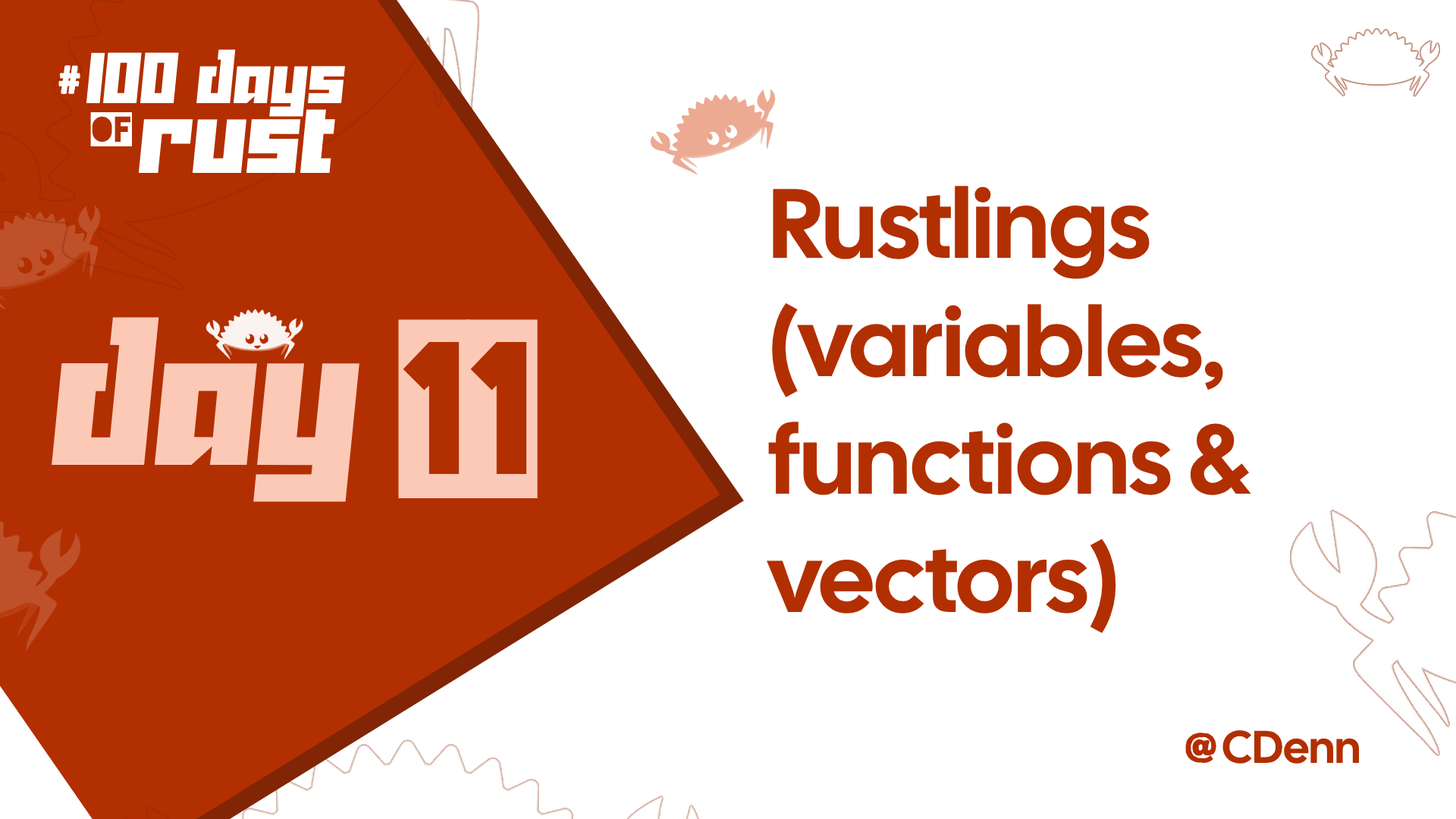
<style>
.page{position:relative;width:1456px;height:819px;background:#ffffff}
.page>*{position:absolute;margin:0}
.t1{font:68.6px "Yukarimobile";color:#ffffff}
.t2{font:40.6px "Matiz";color:#ffffff}
.t3{font:40.6px "Blackout-2AM";color:#ffffff}
.t4{font:99.8px "Yukarimobile";color:#ffffff}
.t5{font:98.3px "CalSans-Regular";color:#b22f01}
.t6{font:189.2px "Yukarimobile";color:#fcc9b7}
.t7{font:212.6px "Blackout-2AM";color:#fcc9b7}
.t8{font:40.6px "Matiz";color:#b22f01}
.t9{font:45.9px "CalSans-Regular";color:#b22f01}
</style>
<div class="page">
<p class="t1" style="left:86px;top:49px;width:259px;height:68px">100 Days</p>
<p class="t2" style="left:58px;top:65px;width:22px;height:29px">#</p>
<p class="t3" style="left:90px;top:112px;width:42px;height:34px">of</p>
<p class="t4" style="left:138px;top:109px;width:197px;height:65px">Rust</p>
<p class="t5" style="left:767px;top:186px;width:484px;height:447px">Rustlings<br>(variables, <br>functions &amp;<br>vectors)</p>
<p class="t6" style="left:52px;top:317px;width:307px;height:185px">Day</p>
<p class="t7" style="left:398px;top:319px;width:140px;height:180px">11</p>
<p class="t8" style="left:1185px;top:733px;width:31px;height:30px">@</p>
<p class="t9" style="left:1222px;top:730px;width:138px;height:34px">CDenn</p>
</div>
